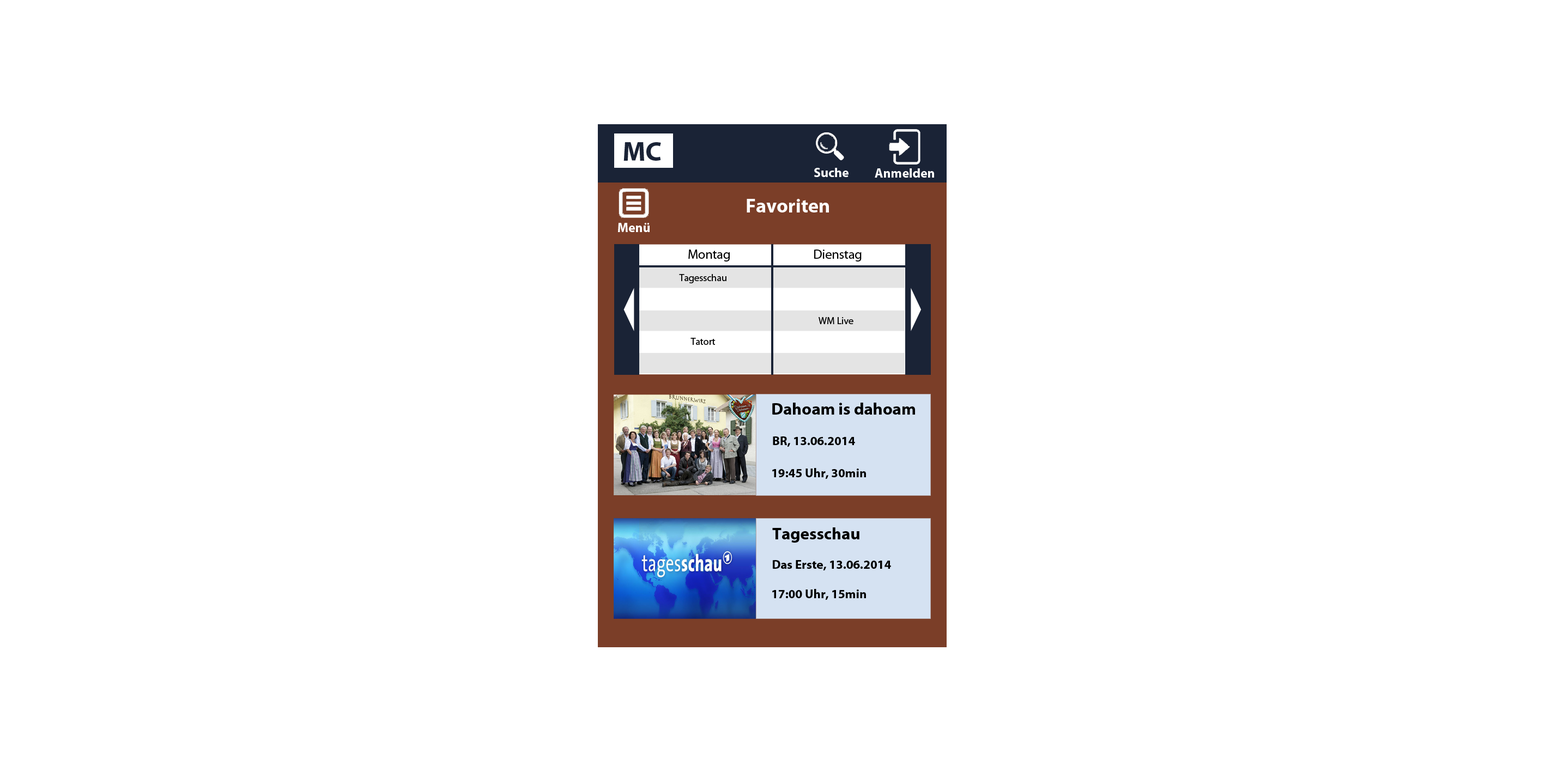
<style>
.page{position:relative;width:1545px;height:772px;background:#ffffff}
.page>*{position:absolute;margin:0}
.t1{font:27.2px "MyriadPro-Bold";color:#1a2336}
.t2{font:13.1px "MyriadPro-Bold";color:#ffffff}
.t3{font:19.6px "MyriadPro-Bold";color:#ffffff}
.t4{font:13.1px "MyriadPro-Regular";color:#000000}
.t5{font:9.8px "MyriadPro-Regular";color:#000000}
.t6{font:16.9px "MyriadPro-Bold";color:#000000}
.t7{font:12.5px "MyriadPro-Bold";color:#000000}
</style>
<div class="page">
<p class="t1" style="left:623px;top:142px;width:38px;height:19px">MC</p>
<p class="t2" style="left:814px;top:168px;width:34px;height:9px">Suche</p>
<p class="t2" style="left:874px;top:168px;width:60px;height:10px">Anmelden</p>
<p class="t3" style="left:746px;top:199px;width:83px;height:13px">Favoriten</p>
<p class="t2" style="left:618px;top:223px;width:31px;height:9px">Menü</p>
<p class="t4" style="left:688px;top:250px;width:42px;height:12px">Montag</p>
<p class="t4" style="left:814px;top:250px;width:47px;height:12px">Dienstag</p>
<p class="t5" style="left:679px;top:274px;width:47px;height:9px">Tagesschau</p>
<p class="t5" style="left:818px;top:317px;width:35px;height:7px">WM Live</p>
<p class="t5" style="left:690px;top:338px;width:25px;height:7px">Tatort</p>
<p class="t6" style="left:772px;top:403px;width:143px;height:12px">Dahoam is dahoam</p>
<p class="t7" style="left:773px;top:436px;width:82px;height:11px">BR, 13.06.2014</p>
<p class="t7" style="left:772px;top:468px;width:94px;height:11px">19:45 Uhr, 30min</p>
<p class="t6" style="left:772px;top:527px;width:87px;height:16px">Tagesschau</p>
<p class="t7" style="left:773px;top:560px;width:118px;height:10px">Das Erste, 13.06.2014</p>
<p class="t7" style="left:772px;top:589px;width:94px;height:11px">17:00 Uhr, 15min</p>
</div>
